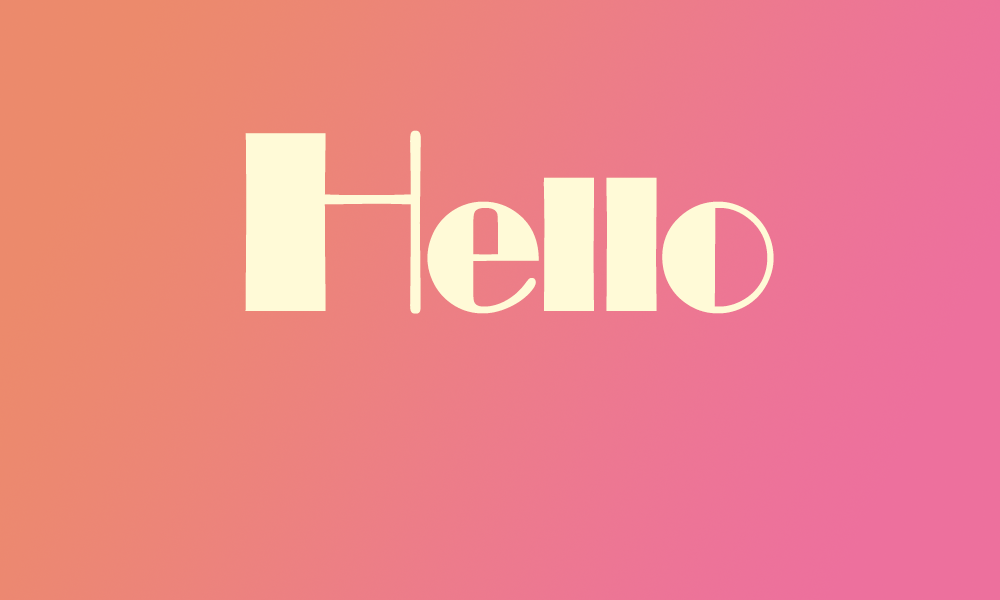
<style>
.page{position:relative;width:1000px;height:600px}
.page>*{position:absolute;margin:0}
.t1{font:200px "Broadway";letter-spacing:-0.05em;color:#fffad7}
.t2{font:266.7px "Broadway";letter-spacing:-0.05em;color:#fffad7}
</style>
<div class="page">
<p class="t1" style="left:245px;top:130px;width:529px;height:184px"><span class="t2">H</span>ello</p>
</div>
